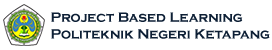
<style>
.page{position:relative;width:272px;height:50px;background:#ffffff}
.page>*{position:absolute;margin:0}
.t1{font:14px "CopperplateGothic-Bold";color:#0d1f35}
</style>
<div class="page">
<p class="t1" style="left:51px;top:12px;width:219px;height:27px">Project Based Learning<br>Politeknik Negeri Ketapang</p>
</div>
